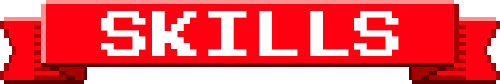
<style>
.page{position:relative;width:500px;height:84px;background:#ff0011}
.page>*{position:absolute;margin:0}
.t1{font:50.9px "PressStart2P-Regular";color:#ffffff}
</style>
<div class="page">
<p class="t1" style="left:101px;top:11px;width:298px;height:45px">SKILLS</p>
</div>
